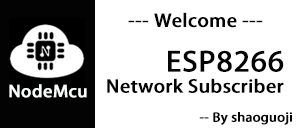
<style>
.page{position:relative;width:296px;height:128px;background:#ffffff}
.page>*{position:absolute;margin:0}
.t1{font:17.3px "AdobeHeitiStd-Regular";color:#040404;font-weight:bold;scale:1.09 1}
.t2{font:26.7px "AdobeHeitiStd-Regular";color:#040404;font-weight:bold;scale:1.09 1}
.t3{font:16px "AdobeHeitiStd-Regular";color:#fbfcfc;font-weight:bold;scale:1.09 1}
.t4{font:12px "AdobeHeitiStd-Regular";color:#040404;font-weight:bold;scale:1.09 1}
</style>
<div class="page">
<p class="t1" style="left:128px;top:12px;width:135px;height:16px">--- Welcome ---</p>
<p class="t2" style="left:168px;top:50px;width:116px;height:22px">ESP8266</p>
<p class="t1" style="left:107px;top:78px;width:177px;height:15px">Network Subscriber</p>
<p class="t3" style="left:9px;top:84px;width:78px;height:14px">NodeMcu</p>
<p class="t4" style="left:199px;top:112px;width:93px;height:13px">-- By shaoguoji</p>
</div>
